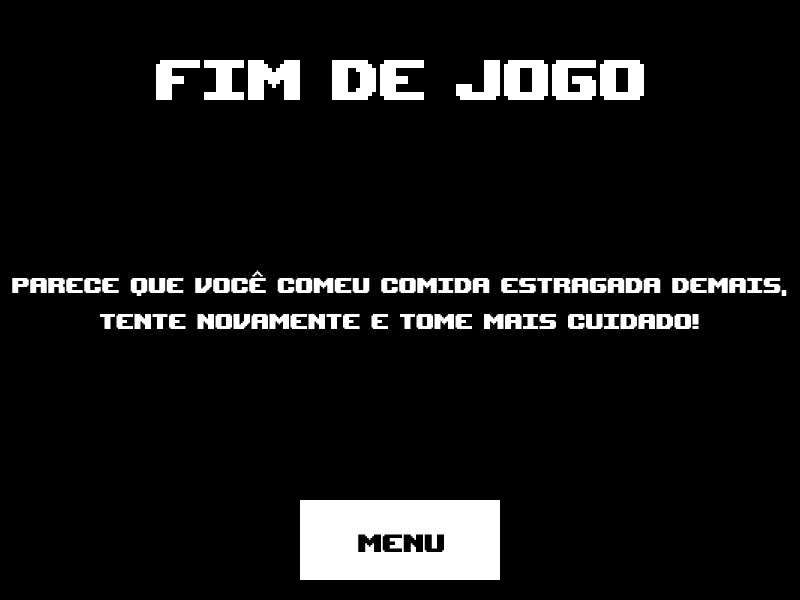
<style>
.page{position:relative;width:800px;height:600px;background:#000000}
.page>*{position:absolute;margin:0}
.t1{font:80px "UpheavalTT-BRK-";color:#ffffff}
.t2{font:30px "UpheavalTT-BRK-";color:#ffffff}
.t3{font:35px "UpheavalTT-BRK-";color:#000000}
</style>
<div class="page">
<p class="t1" style="left:156px;top:60px;width:488px;height:40px">FIM DE JOGO</p>
<p class="t2" style="left:12px;top:270px;width:775px;height:59px;text-align:center">PARECE QUE VOCÊ COMEU COMIDA ESTRAGADA DEMAIS,<br>TENTE NOVAMENTE E TOME MAIS CUIDADO!</p>
<p class="t3" style="left:358px;top:534px;width:86px;height:18px">MENU</p>
</div>
